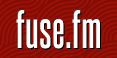
<style>
.page{position:relative;width:117px;height:58px;background:#820d05}
.page>*{position:absolute;margin:0}
.t1{font:46px "SteelfishRg-Bold";color:#ffffff}
</style>
<div class="page">
<p class="t1" style="left:16px;top:10px;width:84px;height:39px">fuse.fm</p>
</div>
